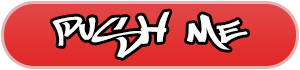
<style>
.page{position:relative;width:300px;height:70px}
.page>*{position:absolute;margin:0}
.t1{font:53.5px "MostWazted";color:#fefbfb}
</style>
<div class="page">
<p class="t1" style="left:52px;top:11px;width:196px;height:47px">push me</p>
</div>
